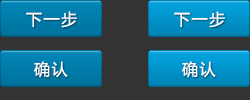
<style>
.page{position:relative;width:250px;height:100px;background:#333333}
.page>*{position:absolute;margin:0}
.t1{font:16px "MicrosoftYaHei";letter-spacing:0.1em;color:#fefeff}
</style>
<div class="page">
<p class="t1" style="left:26px;top:11px;width:51px;height:17px">下一步</p>
<p class="t1" style="left:174px;top:11px;width:51px;height:17px">下一步</p>
<p class="t1" style="left:34px;top:61px;width:34px;height:17px">确认</p>
<p class="t1" style="left:182px;top:61px;width:34px;height:17px">确认</p>
</div>
